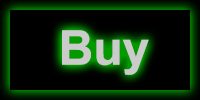
<style>
.page{position:relative;width:200px;height:100px;background:#000000}
.page>*{position:absolute;margin:0}
.t1{font:48px "Arial-BoldMT";color:#cbcbcb}
.t2{font:36px "Arial-BoldMT";color:#cbcbcb}
</style>
<div class="page">
<p class="t1" style="left:62px;top:30px;width:87px;height:45px"><span class="t2"><br><br></span>Buy</p>
</div>
